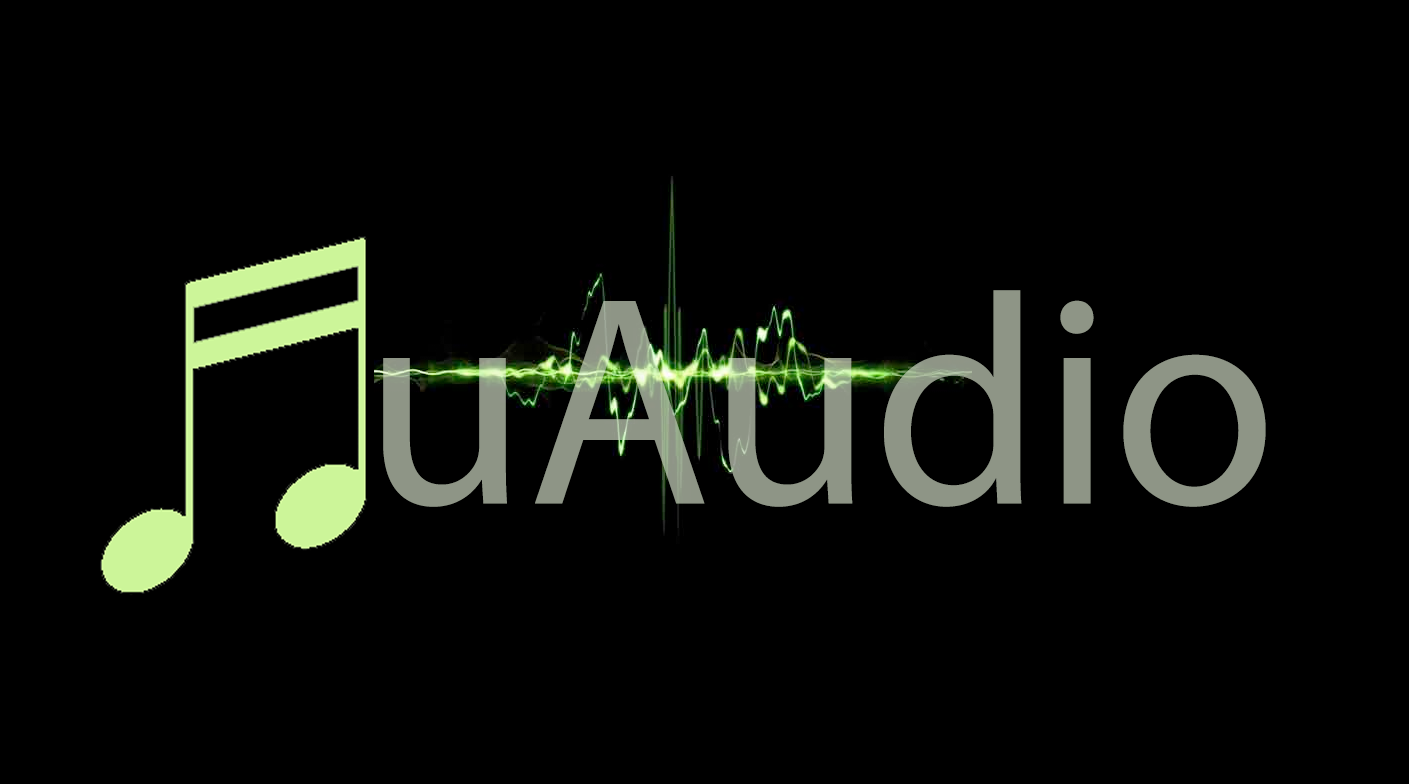
<style>
.page{position:relative;width:1409px;height:784px;background:#000000}
.page>*{position:absolute;margin:0}
.t1{font:300px "MyriadPro-Regular";color:#8e9586}
</style>
<div class="page">
<p class="t1" style="left:383px;top:290px;width:883px;height:217px">uAudio</p>
</div>
